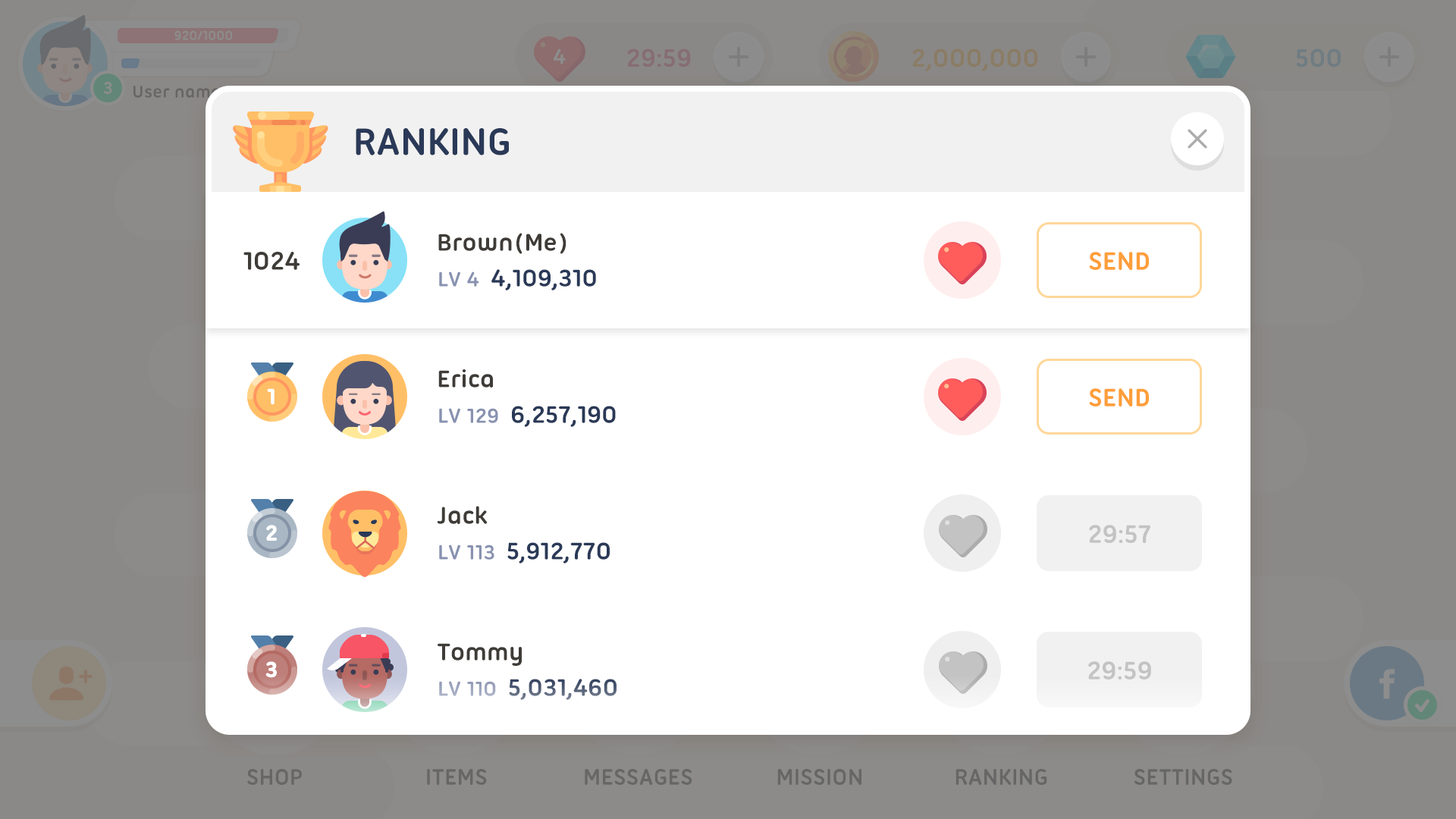
<style>
.page{position:relative;width:1456px;height:819px;background:#ffffff}
.page>*{position:absolute;margin:0}
.t1{font:40.9px "UbuntuTitling-Bold";color:#2a3957;text-transform:uppercase}
.t2{font:25.8px "UbuntuTitling-Bold";color:#3f3c38}
.t3{font:27.3px "UbuntuTitling-Bold";color:#3f3c38}
.t4{font:27.3px "UbuntuTitling-Bold";color:#ff9e3a;text-transform:uppercase}
.t5{font:25.8px "UbuntuTitling-Bold";color:#2a3957}
.t6{font:22px "UbuntuTitling-Bold";color:#8892b0}
.t7{font:22.7px "UbuntuTitling-Bold";color:#ffffff;font-weight:bold}
.t8{font:27.3px "UbuntuTitling-Bold";color:#c3c3c3;text-transform:uppercase}
.t9{font:25.8px "UbuntuTitling-Bold"}
.t10{font:22px "UbuntuTitling-Bold"}
</style>
<div class="page">
<p class="t1" style="left:356px;top:128px;width:153px;height:27px">ranking</p>
<p class="t2" style="left:438px;top:233px;width:128px;height:21px">Brown(Me)</p>
<p class="t3" style="left:243px;top:252px;width:57px;height:18px">1024</p>
<p class="t4" style="left:1089px;top:252px;width:60px;height:18px">send</p>
<p class="t5" style="left:439px;top:269px;width:157px;height:21px"><span class="t6">LV 4  </span>4,109,310</p>
<p class="t2" style="left:438px;top:369px;width:55px;height:19px">Erica</p>
<p class="t7" style="left:267px;top:388px;width:8px;height:17px">1</p>
<p class="t4" style="left:1089px;top:388px;width:60px;height:18px">send</p>
<p class="t5" style="left:439px;top:406px;width:177px;height:21px"><span class="t6">LV 129  </span>6,257,190</p>
<p class="t2" style="left:437px;top:506px;width:51px;height:18px">Jack</p>
<p class="t7" style="left:266px;top:525px;width:11px;height:16px">2</p>
<p class="t8" style="left:1089px;top:525px;width:61px;height:18px">29:57</p>
<p class="t5" style="left:439px;top:542px;width:171px;height:21px"><span class="t6">LV 113  </span>5,912,770</p>
<p class="t2" style="left:438px;top:643px;width:84px;height:23px">Tommy</p>
<p class="t7" style="left:265px;top:661px;width:12px;height:17px">3</p>
<p class="t8" style="left:1088px;top:661px;width:63px;height:18px">29:59</p>
<p class="t9" style="left:439px;top:679px;width:178px;height:21px"><span class="t10">LV 110  </span>5,031,460</p>
</div>
